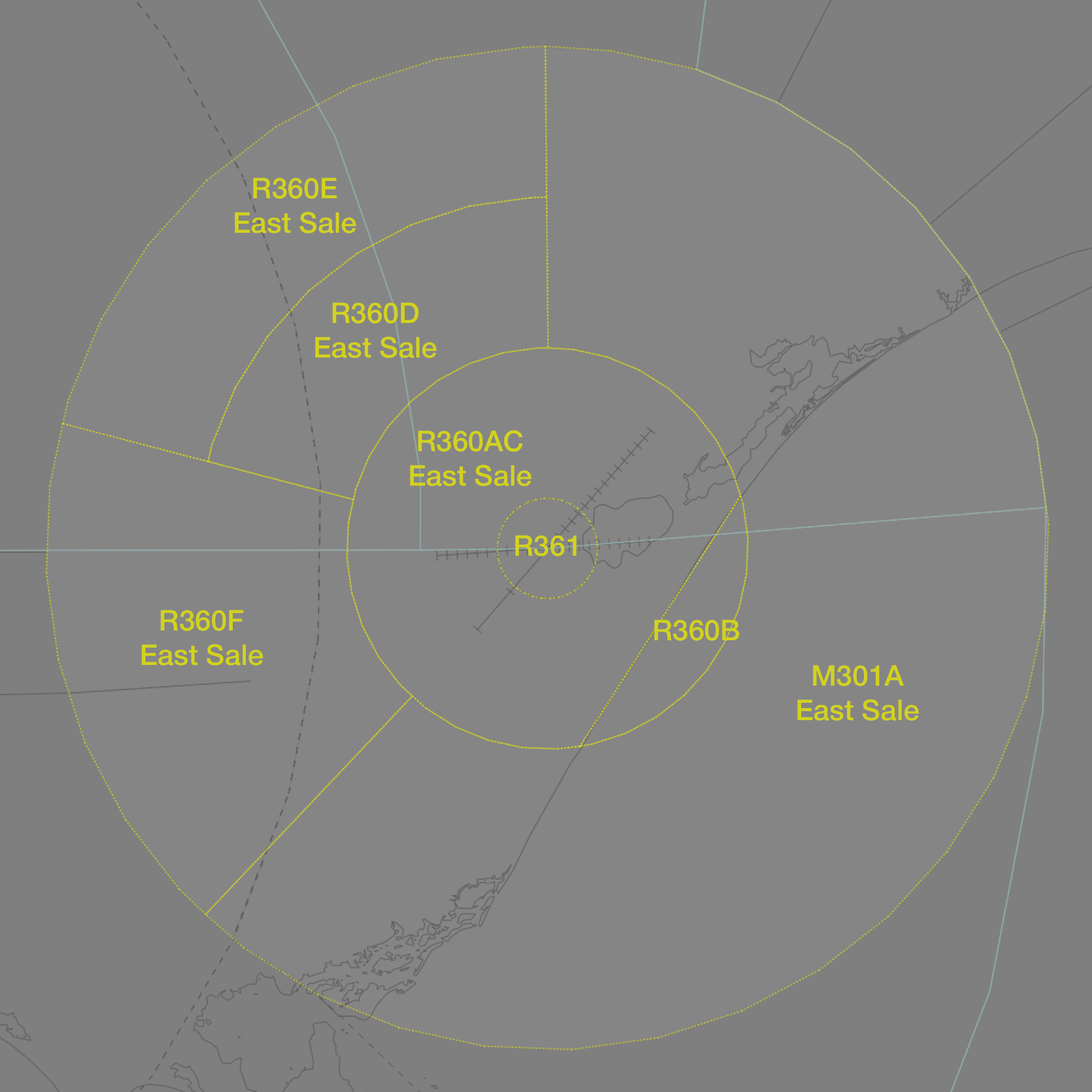
<style>
.page{position:relative;width:1092px;height:1092px;background:#858585}
.page>*{position:absolute;margin:0}
.t1{font:28.7px "HelveticaNeue-Medium";color:#d2d21e}
</style>
<div class="page">
<p class="t1" style="left:234px;top:178px;width:122px;height:55px;text-align:center">R360E<br>East Sale</p>
<p class="t1" style="left:315px;top:302px;width:122px;height:56px;text-align:center">R360D<br>East Sale</p>
<p class="t1" style="left:410px;top:430px;width:122px;height:56px;text-align:center">R360AC<br>East Sale</p>
<p class="t1" style="left:515px;top:535px;width:61px;height:21px">R361</p>
<p class="t1" style="left:141px;top:610px;width:122px;height:56px;text-align:center">R360F<br>East Sale</p>
<p class="t1" style="left:654px;top:620px;width:85px;height:21px">R360B</p>
<p class="t1" style="left:797px;top:665px;width:122px;height:56px;text-align:center">M301A<br>East Sale</p>
</div>
